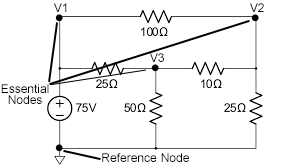
<style>
.page{position:relative;width:300px;height:168px;background:#ffffff}
.page>*{position:absolute;margin:0}
.t1{font:12px "ArialMT";color:#000000}
</style>
<div class="page">
<p class="t1" style="left:54px;top:3px;width:13px;height:9px">V1</p>
<p class="t1" style="left:250px;top:3px;width:14px;height:9px">V2</p>
<p class="t1" style="left:150px;top:53px;width:14px;height:9px">V3</p>
<p class="t1" style="left:1px;top:84px;width:48px;height:9px">Essential</p>
<p class="t1" style="left:8px;top:95px;width:34px;height:9px">Nodes</p>
<p class="t1" style="left:102px;top:153px;width:55px;height:9px">Reference</p>
<p class="t1" style="left:161px;top:153px;width:28px;height:9px">Node</p>
</div>
